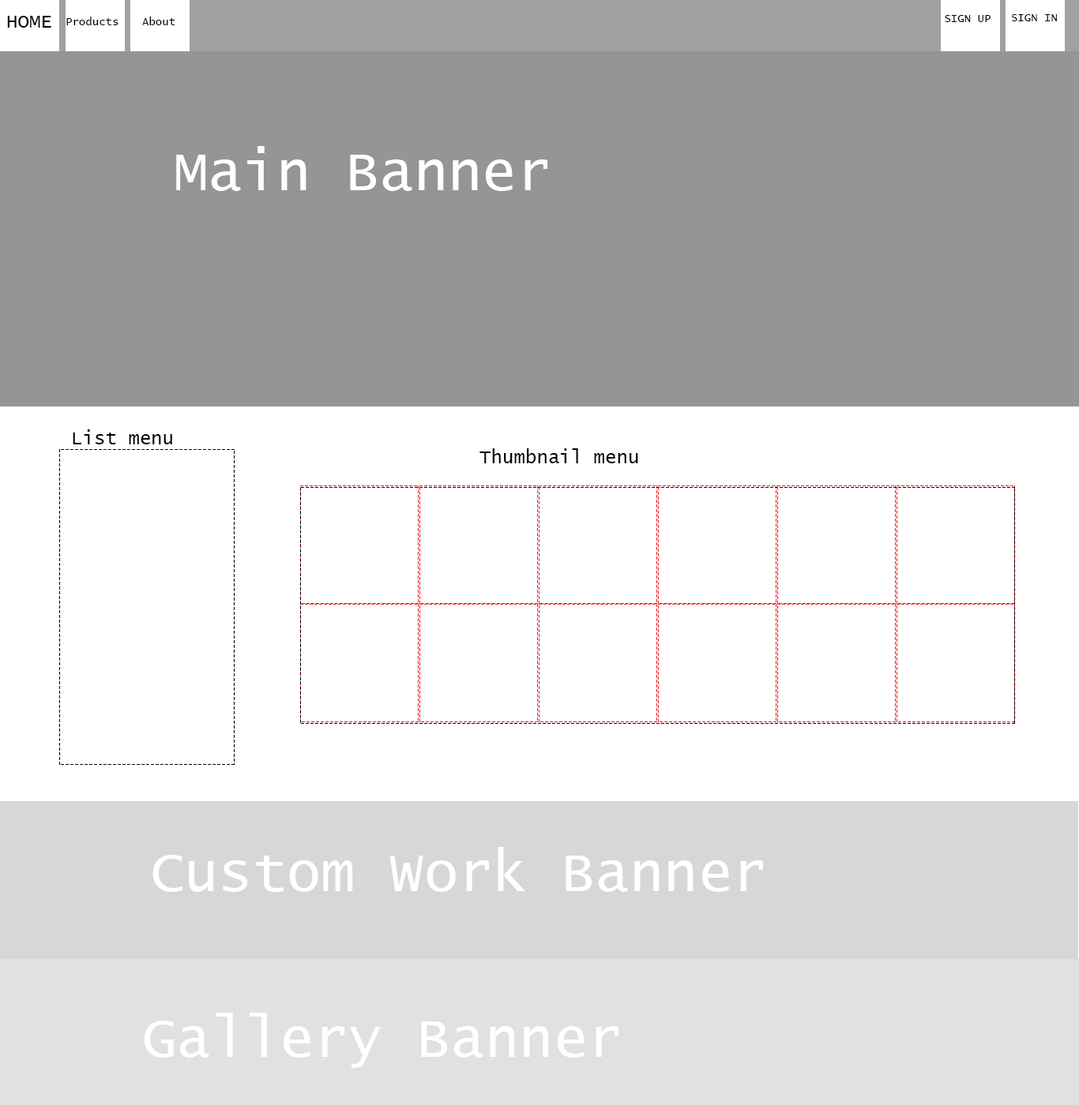
<style>
.page{position:relative;width:1079px;height:1105px;background:#ffffff}
.page>*{position:absolute;margin:0}
.t1{font:19px "LucidaConsole";color:#000000}
.t2{font:11.1px "LucidaConsole";color:#000000}
.t3{font:56.9px "LucidaConsole";color:#ffffff}
</style>
<div class="page">
<p class="t1" style="left:7px;top:16px;width:44px;height:12px">HOME</p>
<p class="t2" style="left:66px;top:17px;width:52px;height:8px">Products</p>
<p class="t2" style="left:142px;top:17px;width:33px;height:8px">About</p>
<p class="t2" style="left:944px;top:15px;width:46px;height:7px">SIGN UP</p>
<p class="t2" style="left:1012px;top:14px;width:45px;height:7px">SIGN IN</p>
<p class="t3" style="left:176px;top:146px;width:371px;height:45px">Main Banner</p>
<p class="t1" style="left:73px;top:430px;width:99px;height:15px">List menu</p>
<p class="t1" style="left:479px;top:449px;width:159px;height:15px">Thumbnail menu</p>
<p class="t3" style="left:152px;top:847px;width:611px;height:45px">Custom Work Banner</p>
<p class="t3" style="left:144px;top:1013px;width:474px;height:55px">Gallery Banner</p>
</div>
